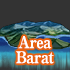
<style>
.page{position:relative;width:70px;height:70px;background:#333333}
.page>*{position:absolute;margin:0}
.t1{font:16px/15px "RyuminPro-ExBold";letter-spacing:-0.04em;color:#ffffff;scale:0.9 1}
</style>
<div class="page">
<p class="t1" style="left:16px;top:36px;width:38px;height:28px;text-align:center">Area<br>Barat</p>
</div>
